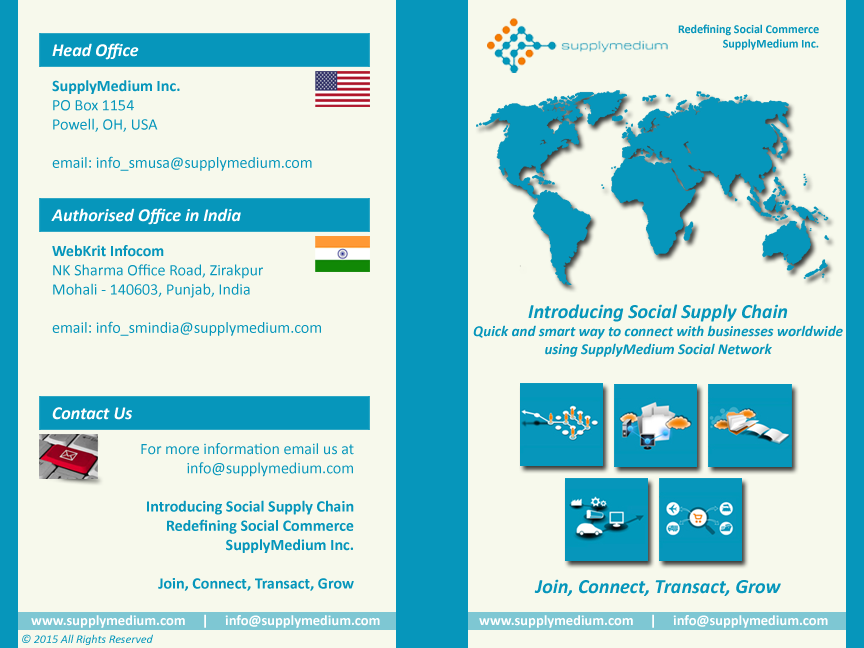
<style>
.page{position:relative;width:864px;height:648px;background:#f7f9ec}
.page>*{position:absolute;margin:0}
.t1{font:12px "Calibri-Bold";color:#0696bb}
.t2{font:18px "Calibri-BoldItalic";color:#ffffff}
.t3{font:16px "Calibri";color:#0696bb}
.t4{font:16px "Calibri-Bold";color:#0696bb}
.t5{font:15px "Calibri-BoldItalic";color:#0696bb}
.t6{font:20px "Calibri-BoldItalic";color:#0696bb}
.t7{font:14.5px "Calibri-Bold";color:#ffffff}
.t8{font:12px "Calibri-Italic";color:#0696bb}
</style>
<div class="page">
<p class="t1" style="left:678px;top:24px;width:141px;height:26px;text-align:right">Redefining Social Commerce<br>SupplyMedium Inc.</p>
<p class="t2" style="left:52px;top:43px;width:87px;height:17px">Head Office</p>
<p class="t3" style="left:52px;top:80px;width:260px;height:91px"><span class="t4">SupplyMedium Inc.<br></span>PO Box 1154<br>Powell, OH, USA<br><br>email: info_smusa@supplymedium.com</p>
<p class="t2" style="left:51px;top:208px;width:190px;height:17px">Authorised Office in India</p>
<p class="t3" style="left:52px;top:245px;width:269px;height:91px"><span class="t4">WebKrit Infocom<br></span>NK Sharma Office Road, Zirakpur<br>Mohali - 140603, Punjab, India<br><br>email: info_smindia@supplymedium.com</p>
<p class="t5" style="left:473px;top:304px;width:370px;height:53px;text-align:center"><span class="t6">Introducing Social Supply Chain<br></span>Quick and smart way to connect with businesses worldwide<br>using SupplyMedium Social Network</p>
<p class="t2" style="left:52px;top:407px;width:80px;height:13px">Contact Us</p>
<p class="t4" style="left:141px;top:443px;width:213px;height:148px;text-align:right"><span class="t3">For more information email us at<br>info@supplymedium.com<br><br></span>Introducing Social Supply Chain<br>Redefining Social Commerce<br>SupplyMedium Inc.<br><br>Join, Connect, Transact, Grow</p>
<p class="t6" style="left:534px;top:579px;width:247px;height:17px">Join, Connect, Transact, Grow</p>
<p class="t7" style="left:31px;top:614px;width:349px;height:14px">www.supplymedium.com     |     info@supplymedium.com</p>
<p class="t7" style="left:479px;top:614px;width:349px;height:14px">www.supplymedium.com     |     info@supplymedium.com</p>
<p class="t8" style="left:22px;top:634px;width:131px;height:11px">© 2015 All Rights Reserved</p>
</div>
